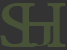
<style>
.page{position:relative;width:67px;height:50px;background:#333333}
.page>*{position:absolute;margin:0}
.t1{font:57.3px "NanumMyeongjoExtraBold";color:#475236;scale:1.29 1}
.t2{font:60px "NanumMyeongjoExtraBold";color:#475236}
.t3{font:24px "NanumMyeongjoExtraBold";color:#475236;scale:2.5 1}
</style>
<div class="page">
<p class="t1" style="left:0px;top:3px;width:33px;height:44px">S</p>
<p class="t2" style="left:16px;top:3px;width:50px;height:44px">H</p>
<p class="t3" style="left:30px;top:23px;width:26px;height:23px">J</p>
</div>
